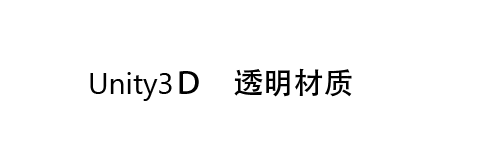
<style>
.page{position:relative;width:480px;height:164px;background:#ffffff}
.page>*{position:absolute;margin:0}
.t1{font:30px "KhmerUI";color:#000000}
.t2{font:30px "AdobeHeitiStd-Regular";color:#000000}
</style>
<div class="page">
<p class="t1" style="left:90px;top:68px;width:262px;height:33px">Unity3<span class="t2">Ｄ　透明材质</span></p>
</div>
